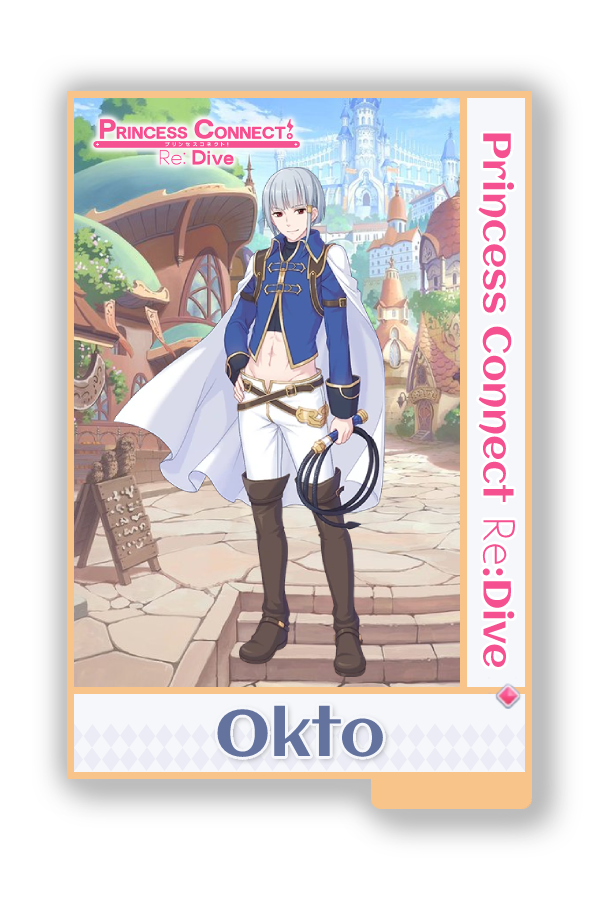
<style>
.page{position:relative;width:600px;height:900px;background:#ffffff}
.page>*{position:absolute;margin:0}
.t1{font:39px "Aclonica-Regular";color:#f55191}
.t2{font:39px "AaarghNormal";color:#f55191}
.t3{font:65px "Aclonica-Regular";color:#64739d}
</style>
<div class="page">
<p class="t1" style="left:478px;top:133px;width:38px;height:534px;rotate:90deg">Princess Connect <span class="t2">Re</span>:Dive</p>
<p class="t3" style="left:217px;top:705px;width:166px;height:52px">Okto</p>
</div>
